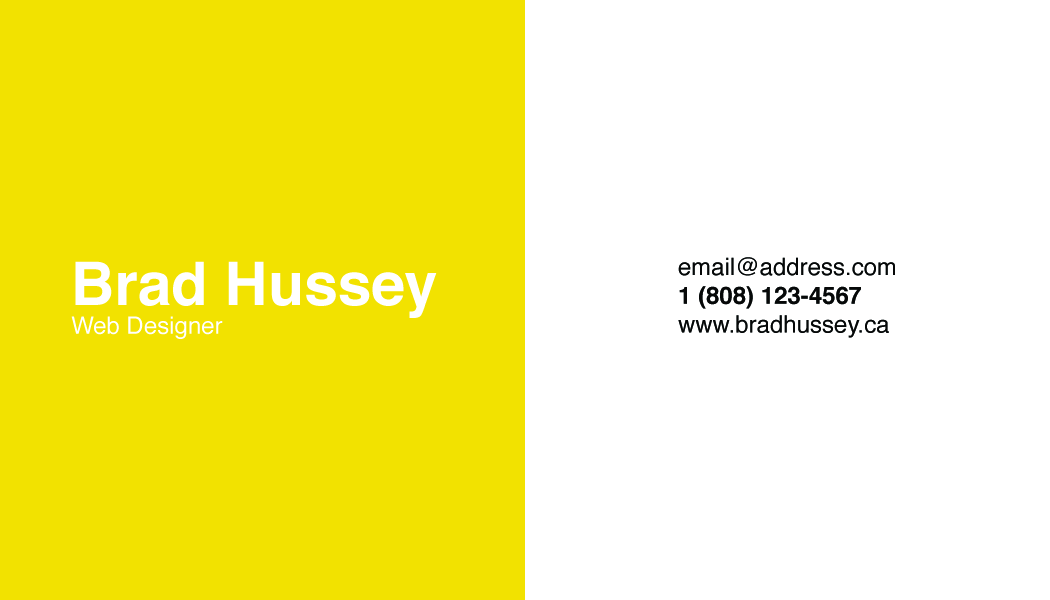
<style>
.page{position:relative;width:1050px;height:600px;background:#ffffff}
.page>*{position:absolute;margin:0}
.t1{font:24px "Helvetica";color:#060808}
.t2{font:24px "Helvetica-Bold";color:#060808}
.t3{font:24px "Helvetica";color:#ffffff}
.t4{font:60px "Helvetica-Bold";color:#ffffff}
</style>
<div class="page">
<p class="t1" style="left:678px;top:257px;width:217px;height:81px">email@address.com<br><span class="t2">1 (808) 123-4567<br></span>www.bradhussey.ca</p>
<p class="t3" style="left:71px;top:261px;width:366px;height:78px"><span class="t4">Brad Hussey<br></span>Web Designer</p>
</div>
